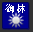
<style>
.page{position:relative;width:33px;height:32px;background:#000090}
.page>*{position:absolute;margin:0}
.t1{font:10.4px "SimSun";color:#ffffff}
</style>
<div class="page">
<p class="t1" style="left:5px;top:4px;width:20px;height:9px">御林</p>
</div>
